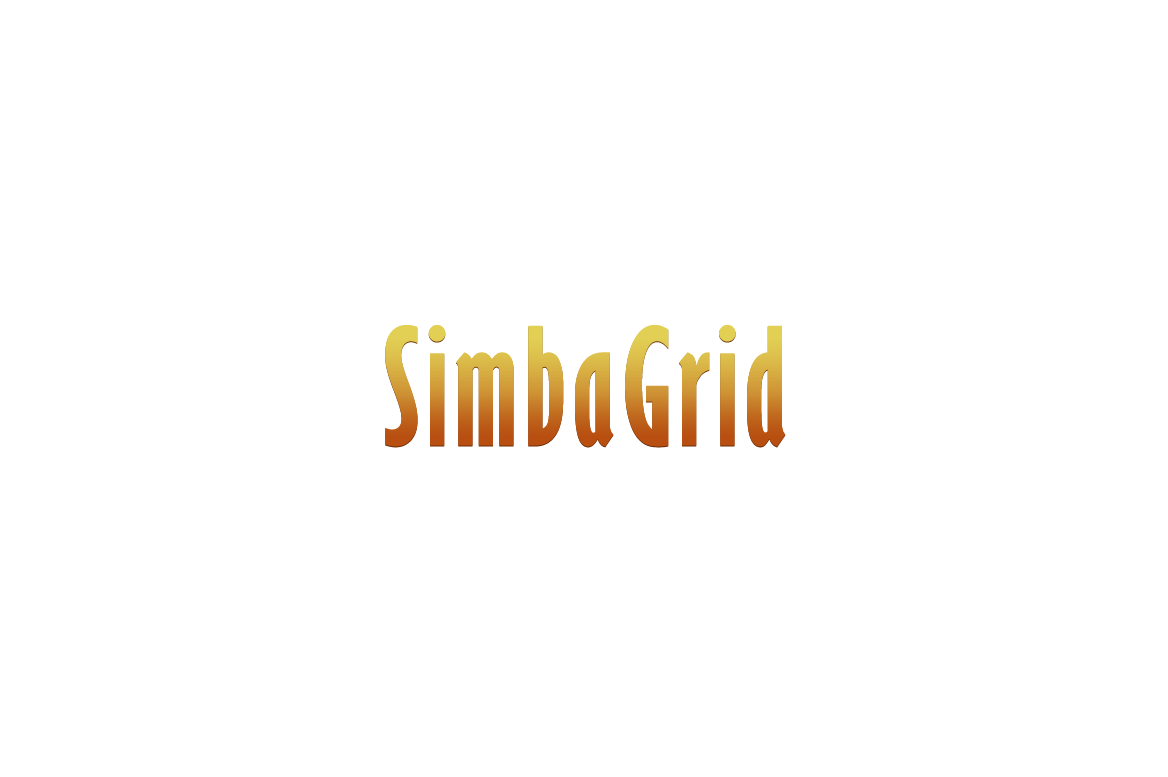
<style>
.page{position:relative;width:1168px;height:777px;background:#ffffff}
.page>*{position:absolute;margin:0}
.t1{font:150px "GillSansMT-ExtraCondensedBold";letter-spacing:0.05em}
</style>
<div class="page">
<p class="t1" style="left:385px;top:325px;width:401px;height:122px">SimbaGrid</p>
</div>
